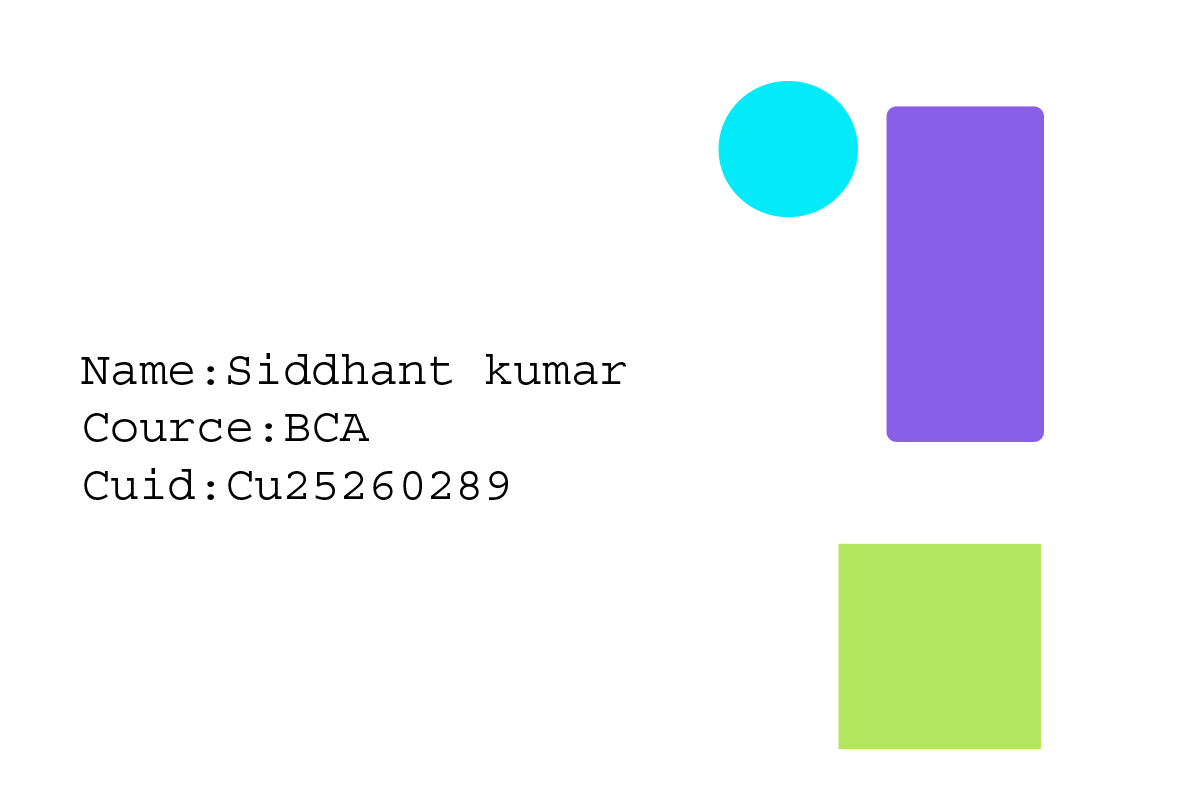
<style>
.page{position:relative;width:1200px;height:800px;background:#ffffff}
.page>*{position:absolute;margin:0}
.t1{font:48px "Courier";color:#000000}
</style>
<div class="page">
<p class="t1" style="left:81px;top:353px;width:545px;height:147px">Name:Siddhant kumar<br>Cource:BCA<br>Cuid:Cu25260289</p>
</div>
